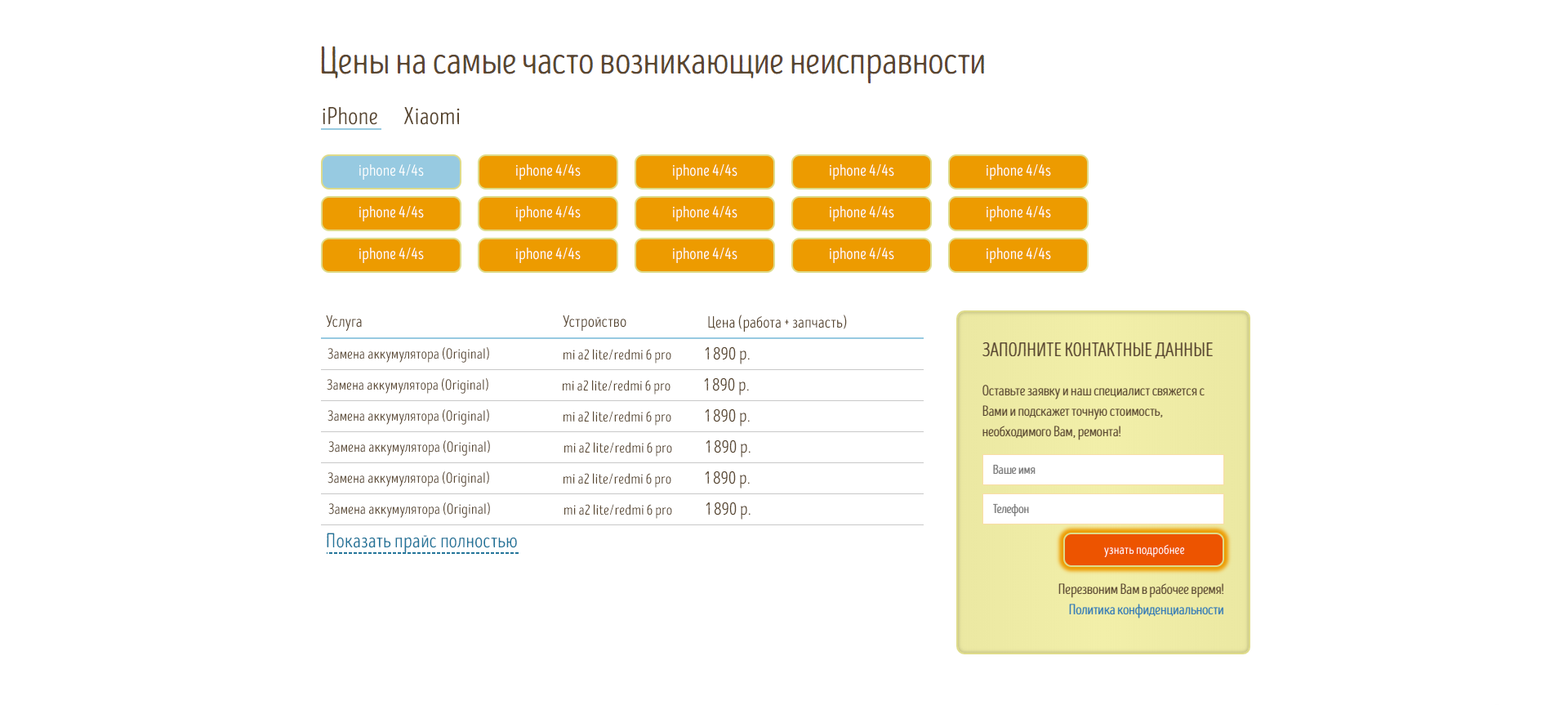
<style>
.page{position:relative;width:1568px;height:705px;background:#ffffff}
.page>*{position:absolute;margin:0}
.t1{font:24.5px "IntroHeadR-Base";letter-spacing:0.02em;color:#594731}
.t2{font:16.3px "IntroHeadR-Base";letter-spacing:0.02em;color:#ffffff}
.t3{font:16.3px "IntroHeadR-Base";letter-spacing:0.02em;color:#594731}
.t4{font:14.7px "IntroHeadR-Base";letter-spacing:0.02em;color:#594731}
.t5{font:18px "IntroHeadR-Base";letter-spacing:0.02em;color:#594731}
.t6{font:20.4px "IntroHeadR-Base";letter-spacing:0.02em;color:#227499}
.t7{font:13.1px "IntroHeadR-Base";letter-spacing:0.02em;color:#ffffff}
</style>
<div class="page">
<p class="t1" style="left:323px;top:107px;width:54px;height:18px">iPhone</p>
<p class="t1" style="left:404px;top:107px;width:56px;height:18px">Xiaomi</p>
<p class="t2" style="left:359px;top:164px;width:65px;height:16px">iphone 4/4s</p>
<p class="t2" style="left:516px;top:164px;width:65px;height:16px">iphone 4/4s</p>
<p class="t2" style="left:673px;top:164px;width:64px;height:16px">iphone 4/4s</p>
<p class="t2" style="left:830px;top:164px;width:64px;height:16px">iphone 4/4s</p>
<p class="t2" style="left:987px;top:164px;width:64px;height:16px">iphone 4/4s</p>
<p class="t2" style="left:359px;top:206px;width:65px;height:15px">iphone 4/4s</p>
<p class="t2" style="left:516px;top:206px;width:65px;height:15px">iphone 4/4s</p>
<p class="t2" style="left:673px;top:206px;width:64px;height:15px">iphone 4/4s</p>
<p class="t2" style="left:830px;top:206px;width:64px;height:15px">iphone 4/4s</p>
<p class="t2" style="left:987px;top:206px;width:64px;height:15px">iphone 4/4s</p>
<p class="t2" style="left:359px;top:247px;width:65px;height:16px">iphone 4/4s</p>
<p class="t2" style="left:516px;top:247px;width:65px;height:16px">iphone 4/4s</p>
<p class="t2" style="left:673px;top:247px;width:64px;height:16px">iphone 4/4s</p>
<p class="t2" style="left:830px;top:247px;width:64px;height:16px">iphone 4/4s</p>
<p class="t2" style="left:987px;top:247px;width:64px;height:16px">iphone 4/4s</p>
<p class="t3" style="left:326px;top:315px;width:36px;height:16px">Услуга</p>
<p class="t3" style="left:563px;top:315px;width:63px;height:16px">Устройство</p>
<p class="t3" style="left:708px;top:314px;width:139px;height:18px">Цена (работа + запчасть)</p>
<p class="t4" style="left:327px;top:347px;width:162px;height:16px">Замена аккумулятора (Original)</p>
<p class="t4" style="left:564px;top:349px;width:107px;height:14px">mi a2 lite/redmi 6 pro</p>
<p class="t5" style="left:705px;top:346px;width:45px;height:18px">1 890 р.</p>
<p class="t5" style="left:704px;top:377px;width:45px;height:18px">1 890 р.</p>
<p class="t4" style="left:327px;top:378px;width:161px;height:16px">Замена аккумулятора (Original)</p>
<p class="t4" style="left:563px;top:380px;width:107px;height:14px">mi a2 lite/redmi 6 pro</p>
<p class="t4" style="left:327px;top:409px;width:162px;height:16px">Замена аккумулятора (Original)</p>
<p class="t4" style="left:564px;top:411px;width:107px;height:14px">mi a2 lite/redmi 6 pro</p>
<p class="t5" style="left:705px;top:408px;width:45px;height:18px">1 890 р.</p>
<p class="t4" style="left:328px;top:440px;width:162px;height:16px">Замена аккумулятора (Original)</p>
<p class="t4" style="left:564px;top:442px;width:108px;height:15px">mi a2 lite/redmi 6 pro</p>
<p class="t5" style="left:706px;top:439px;width:45px;height:18px">1 890 р.</p>
<p class="t4" style="left:327px;top:471px;width:162px;height:16px">Замена аккумулятора (Original)</p>
<p class="t4" style="left:564px;top:473px;width:107px;height:15px">mi a2 lite/redmi 6 pro</p>
<p class="t5" style="left:705px;top:470px;width:45px;height:18px">1 890 р.</p>
<p class="t4" style="left:328px;top:502px;width:162px;height:16px">Замена аккумулятора (Original)</p>
<p class="t4" style="left:564px;top:504px;width:108px;height:15px">mi a2 lite/redmi 6 pro</p>
<p class="t5" style="left:706px;top:501px;width:45px;height:18px">1 890 р.</p>
<p class="t6" style="left:327px;top:532px;width:190px;height:21px">Показать прайс полностью</p>
<p class="t7" style="left:1104px;top:544px;width:80px;height:13px">узнать подробнее</p>
</div>
